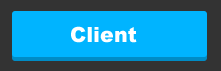
<style>
.page{position:relative;width:221px;height:71px;background:#00b4ff}
.page>*{position:absolute;margin:0}
.t1{font:21px "Arial-Black";color:#ffffff}
</style>
<div class="page">
<p class="t1" style="left:71px;top:26px;width:66px;height:17px">Client</p>
</div>
